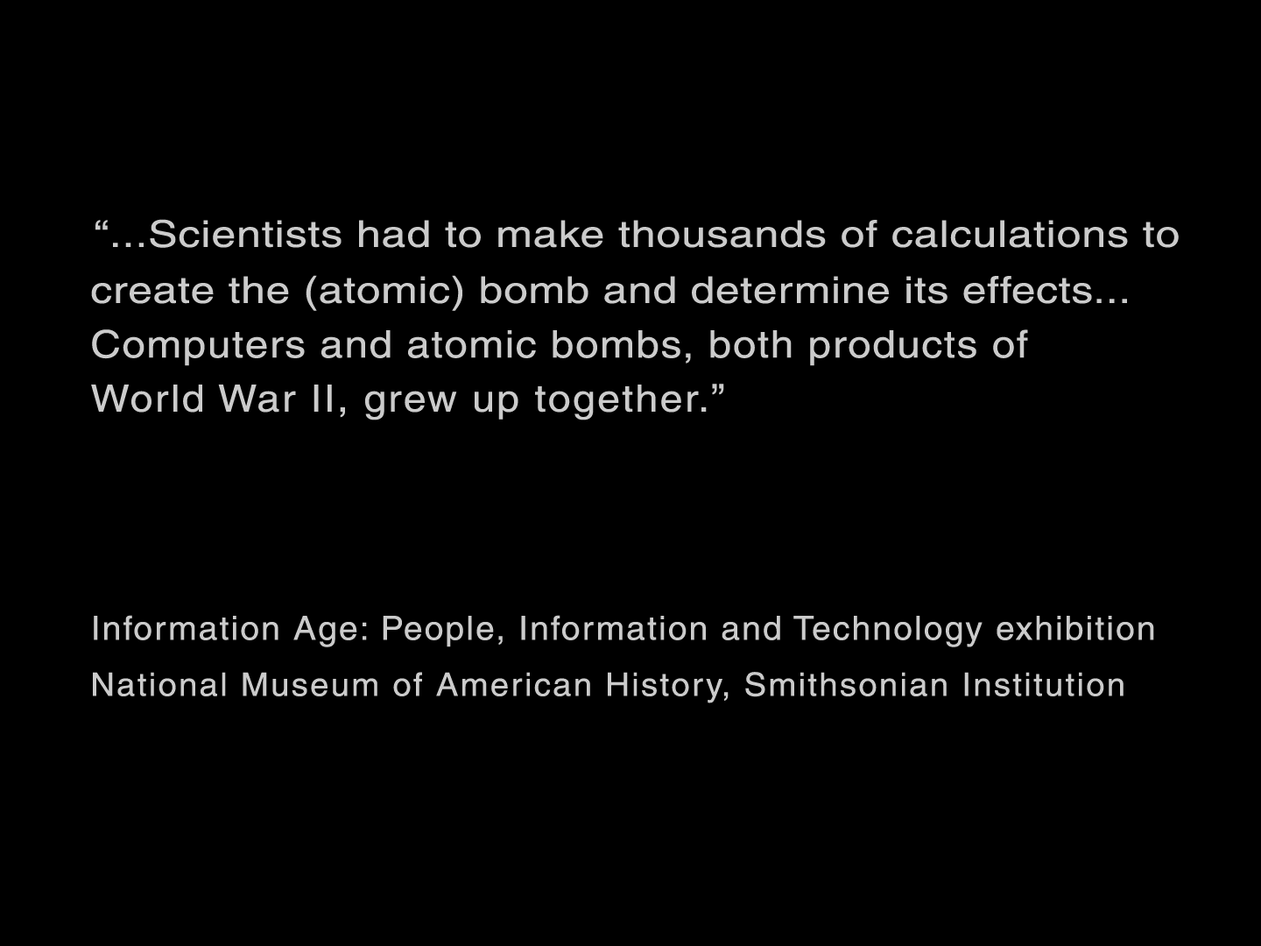
<style>
.page{position:relative;width:1261px;height:946px;background:#000000}
.page>*{position:absolute;margin:0}
.t1{font:36.9px "Helvetica";letter-spacing:0.017em;color:#cbcbcb;scale:1.19 1}
.t2{font:36.9px "Helvetica";letter-spacing:0.015em;color:#cbcbcb;scale:1.18 1}
.t3{font:37.9px "Helvetica";letter-spacing:0.031em;color:#cbcbcb;scale:1.11 1}
.t4{font:37.5px "Helvetica";letter-spacing:0.045em;color:#cbcbcb;scale:1.09 1}
.t5{font:40.3px "Helvetica";letter-spacing:0.045em;color:#cbcbcb}
.t6{font:33.1px "Helvetica";letter-spacing:0.053em;color:#cbcbcb;scale:1.04 1}
.t7{font:32.2px "Helvetica";letter-spacing:0.06em;color:#cbcbcb;scale:1.04 1}
</style>
<div class="page">
<p class="t1" style="left:95px;top:219px;width:1084px;height:29px">“...Scientists had to make thousands of calculations to</p>
<p class="t2" style="left:91px;top:275px;width:1036px;height:36px">create the (atomic) bomb and determine its effects...</p>
<p class="t3" style="left:92px;top:329px;width:936px;height:37px">Computers and atomic bombs, both products of</p>
<p class="t4" style="left:91px;top:384px;width:616px;height:36px">World War II, grew up together.</p>
<p class="t5" style="left:712px;top:384px;width:12px;height:11px">”</p>
<p class="t6" style="left:94px;top:615px;width:1060px;height:32px">Information Age: People, Information and Technology exhibition</p>
<p class="t7" style="left:93px;top:672px;width:1030px;height:31px">National Museum of American History, Smithsonian Institution</p>
</div>
